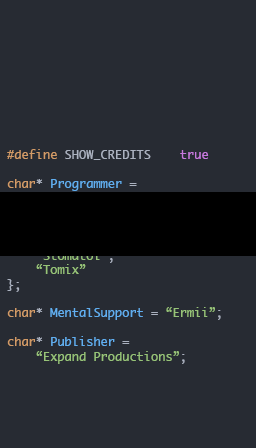
<style>
.page{position:relative;width:256px;height:448px;background:#272b33}
.page>*{position:absolute;margin:0}
.t1{font:12px "Monaco";color:#97c378}
.t2{font:12px "Monaco";color:#d29b67}
.t3{font:12px "Monaco";color:#abb2c0}
.t4{font:12px "Monaco";color:#c679dd}
.t5{font:12px "Monaco";color:#61aeef}
</style>
<div class="page">
<p class="t1" style="left:7px;top:149px;width:214px;height:215px"><span class="t2">#define</span><span class="t3"> SHOW_CREDITS    </span><span class="t4">true<br></span><span class="t2"><br>char</span><span class="t3">* </span><span class="t5">Programmer</span><span class="t3"> =<br></span>    “Gericom (Florian Nouwt)”<span class="t3">;<br><br></span><span class="t2">char</span><span class="t3">* </span><span class="t5">Artists</span><span class="t3">[] = {<br>    </span>“Jesse”<span class="t3">,    <br></span>    “Stomatol”<span class="t3">,<br>    </span>“Tomix”<span class="t3"><br>};<br><br></span><span class="t2">char</span><span class="t3">* </span><span class="t5">MentalSupport</span><span class="t3"> =</span> “Ermii”<span class="t3">;<br><br></span><span class="t2">char</span><span class="t3">* </span><span class="t5">Publisher</span><span class="t3"> = <br></span>    “Expand Productions”<span class="t3">;</span></p>
</div>
